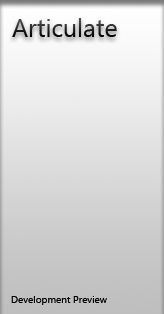
<style>
.page{position:relative;width:164px;height:314px}
.page>*{position:absolute;margin:0}
.t1{font:25px "LaoUI"}
.t2{font:10px "LaoUI";color:#000000}
</style>
<div class="page">
<p class="t1" style="left:12px;top:18px;width:105px;height:19px">Articulate</p>
<p class="t2" style="left:11px;top:296px;width:96px;height:9px">Development Preview</p>
</div>
